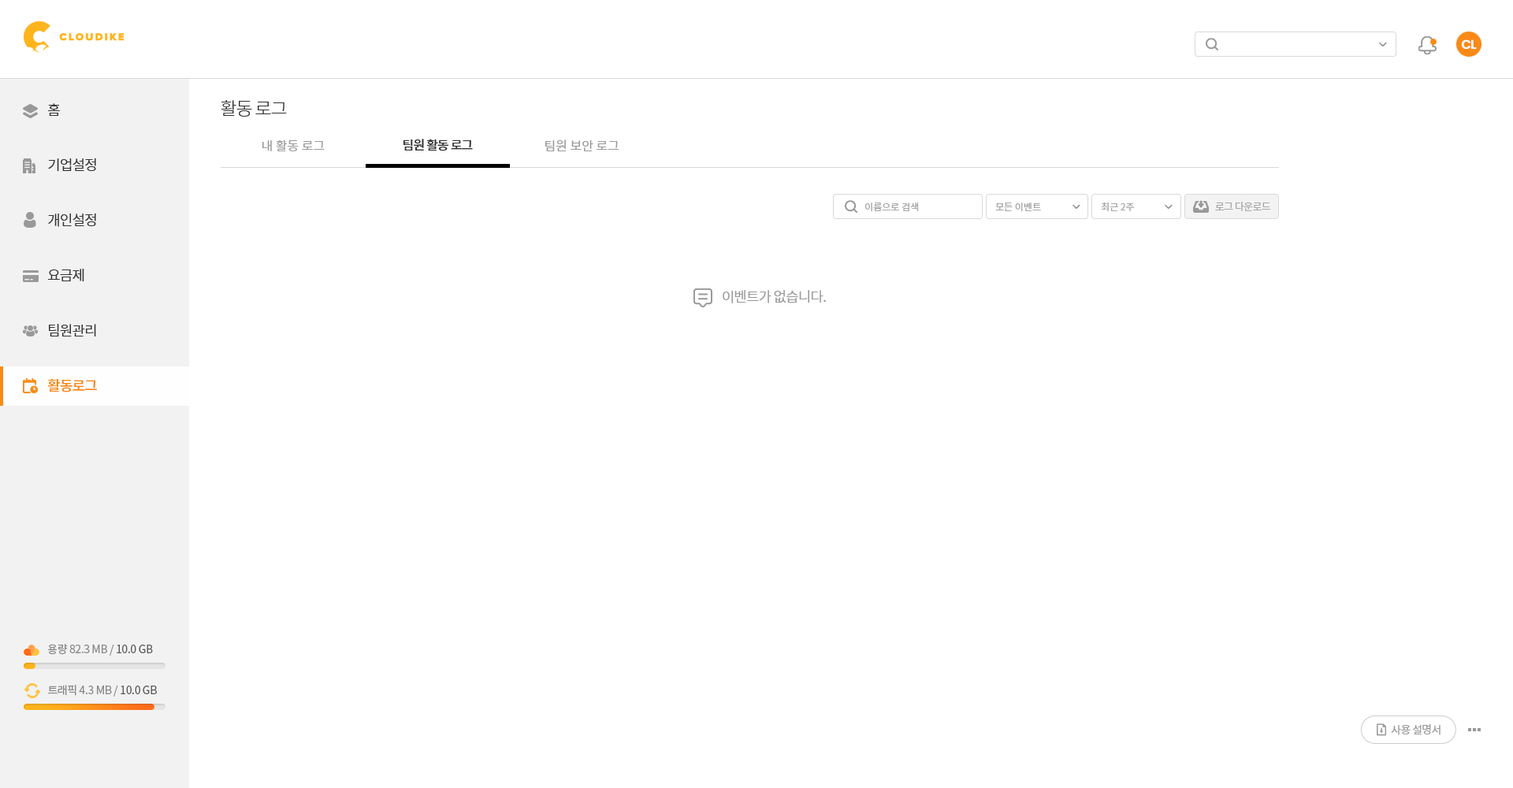
<style>
.page{position:relative;width:1513px;height:788px;background:#ffffff}
.page>*{position:absolute;margin:0}
.t1{font:12.6px "Poppins-SemiBold";letter-spacing:-0.05em;color:#ffffff}
.t2{font:18.1px "NotoSansCJKkr-Light";letter-spacing:-0.05em;color:#333333}
.t3{font:14.2px/55.2px "NotoSansCJKkr-DemiLight";letter-spacing:-0.05em;color:#333333}
.t4{font:14.2px/55.2px "NotoSansCJKkr-Medium";letter-spacing:-0.05em;color:#f98a17}
.t5{font:12.6px "NotoSansCJKkr-DemiLight";color:#999999}
.t6{font:12.6px "NotoSansCJKkr-Medium";letter-spacing:-0.05em;color:#333333}
.t7{font:9.5px "NotoSansCJKkr-DemiLight";color:#a1a1a1}
.t8{font:10.2px "NotoSansCJKkr-DemiLight";letter-spacing:-0.05em;color:#a1a1a1}
.t9{font:14.2px "NotoSansCJKkr-DemiLight";letter-spacing:-0.05em;color:#999999}
.t10{font:11px "NotoSansCJKkr-Regular";letter-spacing:-0.025em;color:#888888}
.t11{font:11px "NotoSansCJKkr-Regular";letter-spacing:-0.025em;color:#585858}
.t12{font:11px "NotoSansCJKkr-Regular";letter-spacing:-0.05em;color:#999999}
</style>
<div class="page">
<p class="t1" style="left:1461px;top:39px;width:16px;height:10px">CL</p>
<p class="t2" style="left:221px;top:100px;width:66px;height:17px">활동 로그</p>
<p class="t3" style="left:47px;top:103px;width:50px;height:289px">홈<br>기업설정<br>개인설정<br>요금제<br>팀원관리<br><span class="t4">활동로그</span></p>
<p class="t5" style="left:262px;top:139px;width:63px;height:12px">내 활동 로그</p>
<p class="t6" style="left:403px;top:139px;width:70px;height:12px">팀원 활동 로그</p>
<p class="t5" style="left:545px;top:139px;width:74px;height:12px">팀원 보안 로그</p>
<p class="t7" style="left:865px;top:203px;width:54px;height:9px">이름으로 검색</p>
<p class="t7" style="left:995px;top:203px;width:46px;height:9px">모든 이벤트</p>
<p class="t7" style="left:1101px;top:202px;width:34px;height:9px">최근 2주</p>
<p class="t8" style="left:1215px;top:202px;width:56px;height:9px">로그 다운로드</p>
<p class="t9" style="left:723px;top:290px;width:103px;height:13px">이벤트가 없습니다.</p>
<p class="t10" style="left:47px;top:644px;width:106px;height:12px">용량 82.3 MB / <span class="t11">10.0 GB</span></p>
<p class="t10" style="left:48px;top:685px;width:109px;height:12px">트래픽 4.3 MB / <span class="t11">10.0 GB</span></p>
<p class="t12" style="left:1391px;top:724px;width:50px;height:11px">사용 설명서</p>
</div>
